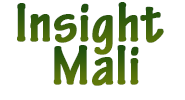
<style>
.page{position:relative;width:185px;height:100px;background:#ffffff}
.page>*{position:absolute;margin:0}
.t1{font:60px "TektonPro-BoldCond";color:#3e630c;font-weight:bold}
.t2{font:60px "TektonPro-BoldCond";font-weight:bold}
</style>
<div class="page">
<p class="t1" style="left:17px;top:2px;width:147px;height:53px">Insight</p>
<p class="t2" style="left:53px;top:45px;width:86px;height:41px">Mali</p>
</div>
